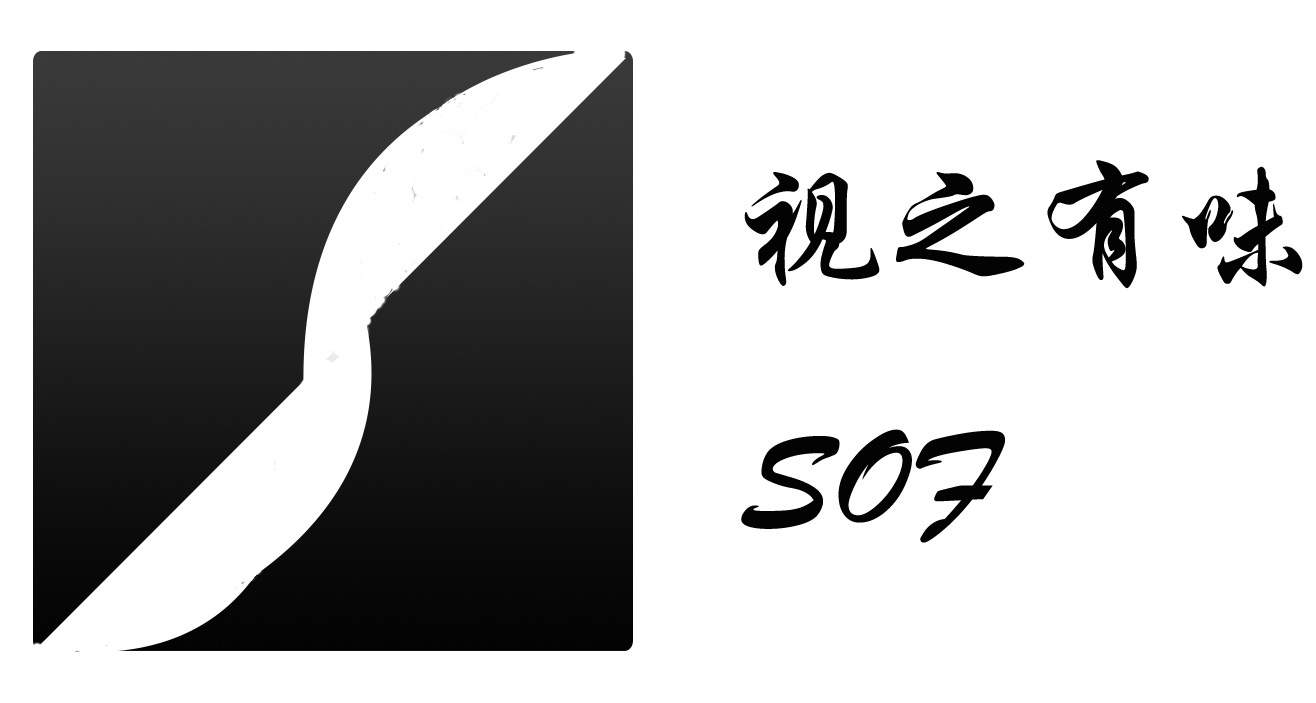
<style>
.page{position:relative;width:1316px;height:703px;background:#ffffff}
.page>*{position:absolute;margin:0}
.t1{font:144px "STXingkai";color:#030303}
</style>
<div class="page">
<p class="t1" style="left:741px;top:160px;width:562px;height:383px">视之有味<br>SOF</p>
</div>
